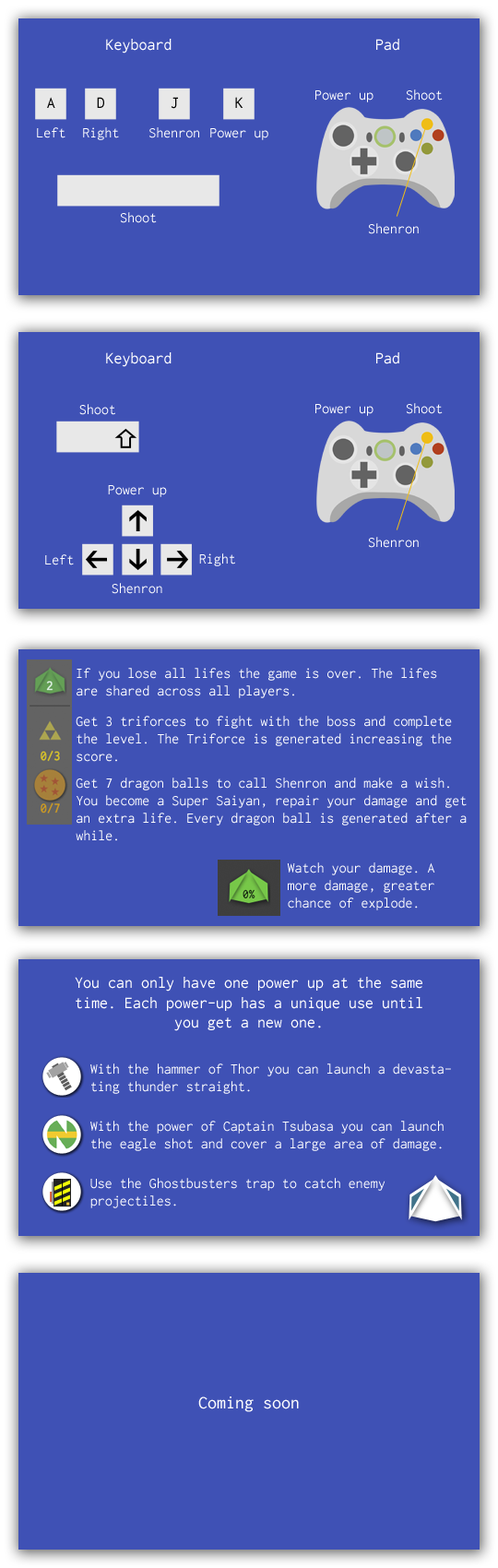
<style>
.page{position:relative;width:498px;height:1568px;background:#3f51b5}
.page>*{position:absolute;margin:0}
.t1{font:16.6px "Inconsolata-Regular";color:#ffffff}
.t2{font:14.8px "Inconsolata-Regular";color:#ffffff}
.t3{font:16.6px "Inconsolata-Regular";color:#000000}
.t4{font:18.4px "Inconsolata-Regular";color:#ffffff}
</style>
<div class="page">
<p class="t1" style="left:106px;top:39px;width:66px;height:14px">Keyboard</p>
<p class="t1" style="left:376px;top:39px;width:23px;height:12px">Pad</p>
<p class="t2" style="left:406px;top:89px;width:37px;height:12px">Shoot</p>
<p class="t3" style="left:47px;top:97px;width:8px;height:11px">A</p>
<p class="t3" style="left:97px;top:97px;width:7px;height:11px">D</p>
<p class="t3" style="left:171px;top:97px;width:7px;height:12px">J</p>
<p class="t3" style="left:235px;top:97px;width:9px;height:11px">K</p>
<p class="t2" style="left:315px;top:90px;width:59px;height:12px">Power up</p>
<p class="t2" style="left:37px;top:127px;width:28px;height:11px">Left</p>
<p class="t2" style="left:83px;top:127px;width:36px;height:13px">Right</p>
<p class="t2" style="left:149px;top:127px;width:50px;height:11px">Shenron</p>
<p class="t2" style="left:210px;top:128px;width:58px;height:12px">Power up</p>
<p class="t2" style="left:120px;top:212px;width:37px;height:11px">Shoot</p>
<p class="t2" style="left:368px;top:223px;width:51px;height:11px">Shenron</p>
<p class="t1" style="left:106px;top:352px;width:66px;height:15px">Keyboard</p>
<p class="t1" style="left:376px;top:352px;width:23px;height:12px">Pad</p>
<p class="t2" style="left:79px;top:404px;width:36px;height:11px">Shoot</p>
<p class="t2" style="left:315px;top:404px;width:59px;height:12px">Power up</p>
<p class="t2" style="left:406px;top:403px;width:37px;height:11px">Shoot</p>
<p class="t2" style="left:108px;top:485px;width:59px;height:12px">Power up</p>
<p class="t2" style="left:368px;top:537px;width:51px;height:11px">Shenron</p>
<p class="t2" style="left:45px;top:554px;width:29px;height:11px">Left</p>
<p class="t2" style="left:199px;top:553px;width:36px;height:13px">Right</p>
<p class="t2" style="left:112px;top:583px;width:50px;height:11px">Shenron</p>
<p class="t2" style="left:77px;top:668px;width:360px;height:30px">If you lose all lifes the game is over. The lifes are shared across all players.</p>
<p class="t2" style="left:76px;top:716px;width:376px;height:46px">Get 3 triforces to fight with the boss and complete the level. The Triforce is generated increasing the score.</p>
<p class="t2" style="left:76px;top:778px;width:391px;height:63px">Get 7 dragon balls to call Shenron and make a wish. You become a Super Saiyan, repair your damage and get an extra life. Every dragon ball is generated after a while.</p>
<p class="t2" style="left:287px;top:862px;width:148px;height:48px">Watch your damage. A more damage, greater chance of explode.</p>
<p class="t1" style="left:75px;top:977px;width:347px;height:54px;text-align:center">You can only have one power up at the same time. Each power-up has a unique use until you get a new one.</p>
<p class="t2" style="left:90px;top:1063px;width:361px;height:31px">With the hammer of Thor you can launch a devastating thunder straight.</p>
<p class="t2" style="left:90px;top:1121px;width:354px;height:30px">With the power of Captain Tsubasa you can launch the eagle shot and cover a large area of damage.</p>
<p class="t2" style="left:90px;top:1178px;width:296px;height:30px">Use the Ghostbusters trap to catch enemy projectiles.</p>
<p class="t4" style="left:198px;top:1396px;width:101px;height:16px">Coming soon</p>
</div>
